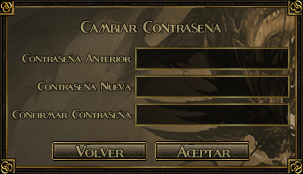
<style>
.page{position:relative;width:303px;height:174px}
.page>*{position:absolute;margin:0}
.t1{font:31px "Fleet-Street";color:#a59768;scale:0.94 1}
.t2{font:22px "Fleet-Street";color:#a79969}
.t3{font:22px "Fleet-Street";color:#a89a6a}
.t4{font:30px "Fleet-Street";color:#a29466}
.t5{font:30px "Fleet-Street";color:#a19466}
</style>
<div class="page">
<p class="t1" style="left:80px;top:21px;width:142px;height:12px">Cambiar Contraseña</p>
<p class="t2" style="left:22px;top:53px;width:111px;height:10px">Contraseña Anterior:</p>
<p class="t3" style="left:37px;top:82px;width:96px;height:9px">Contraseña Nueva:</p>
<p class="t2" style="left:12px;top:110px;width:121px;height:9px">Confirmar Contraseña:</p>
<p class="t4" style="left:75px;top:146px;width:50px;height:12px">Volver</p>
<p class="t5" style="left:176px;top:145px;width:55px;height:13px">Aceptar</p>
</div>
